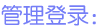
<style>
.page{position:relative;width:99px;height:28px;background:#ffffff}
.page>*{position:absolute;margin:0}
.t1{font:22px "FZY3K--GBK1-0";color:#757ef7}
</style>
<div class="page">
<p class="t1" style="left:1px;top:5px;width:95px;height:21px">管理登录：</p>
</div>
